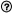
<style>
.page{position:relative;width:13px;height:13px;background:#ffffff}
.page>*{position:absolute;margin:0}
.t1{font:9px "Arial-BoldMT";letter-spacing:0.05em;color:#000000;font-weight:bold}
</style>
<div class="page">
<p class="t1" style="left:4px;top:3px;width:6px;height:8px">?</p>
</div>
